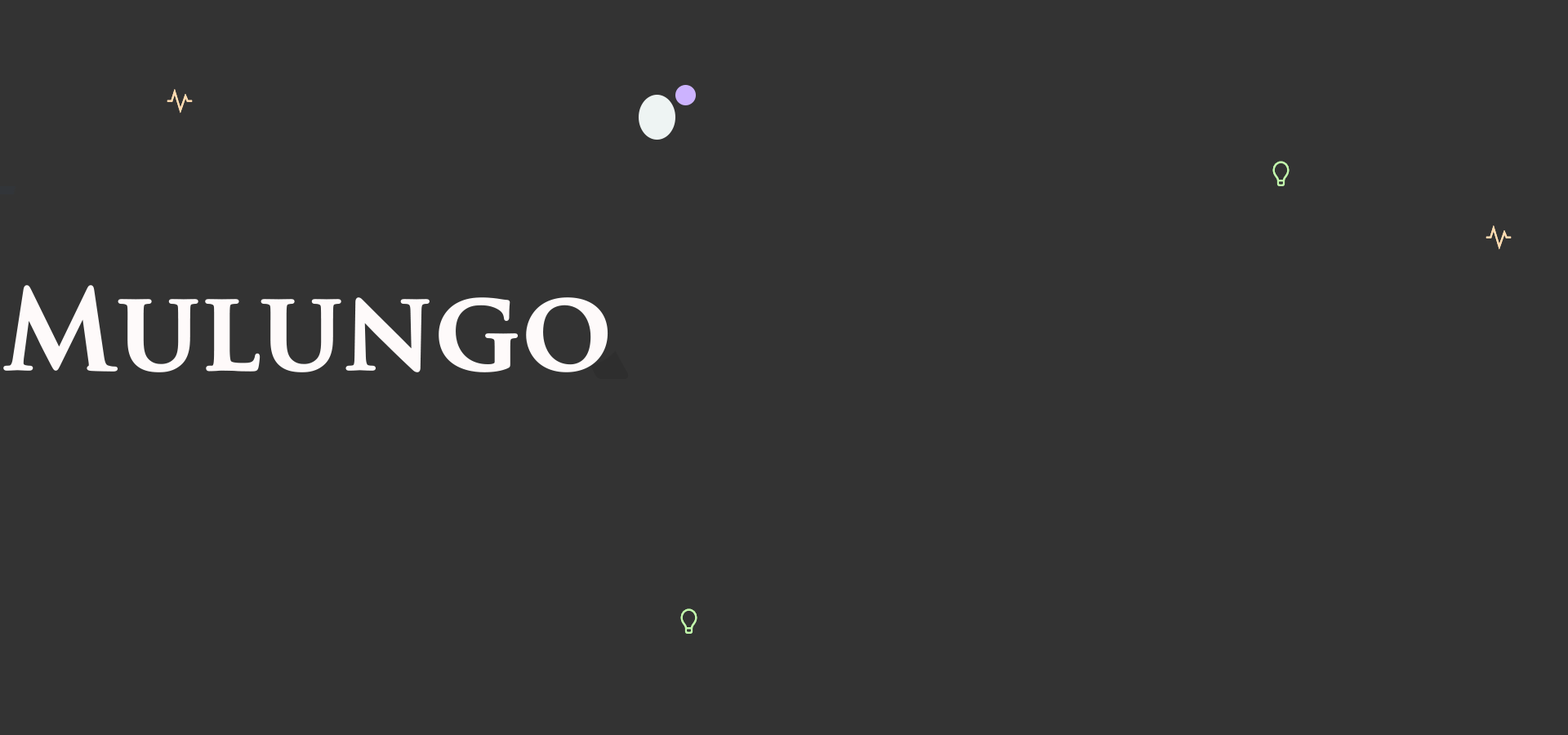
<style>
.page{position:relative;width:1568px;height:735px;background:#333333}
.page>*{position:absolute;margin:0}
.t1{font:107.8px "TrajanPro-Bold";color:#fefafa;font-weight:bold}
</style>
<div class="page">
<p class="t1" style="left:3px;top:285px;width:605px;height:87px">Mulungo</p>
</div>
